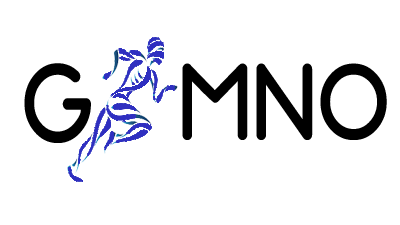
<style>
.page{position:relative;width:400px;height:225px;background:#ffffff}
.page>*{position:absolute;margin:0}
.t1{font:109px "Neon80s";color:#000000;scale:0.87 1}
</style>
<div class="page">
<p class="t1" style="left:182px;top:63px;width:205px;height:77px">MNO</p>
</div>
